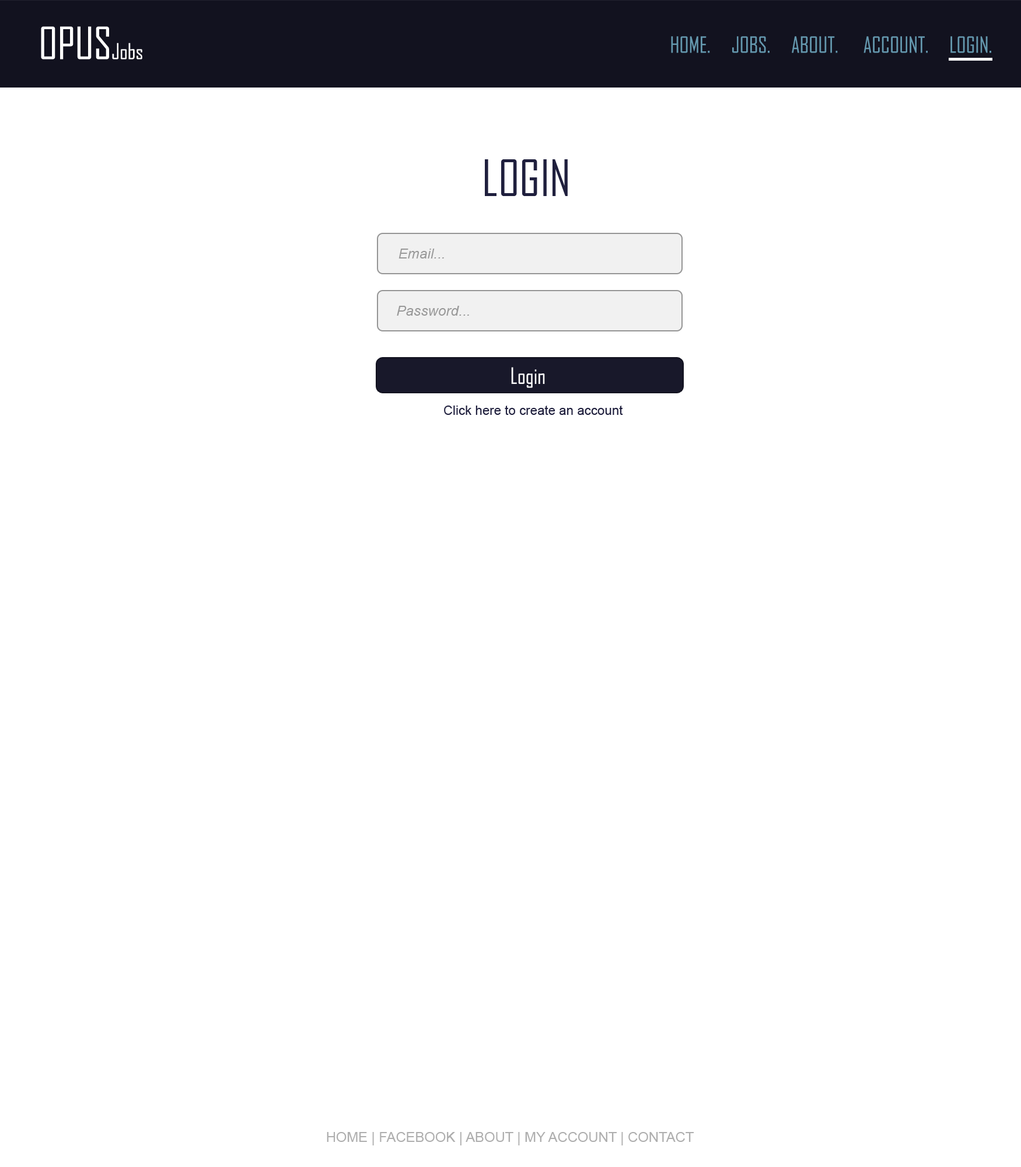
<style>
.page{position:relative;width:1021px;height:1167px;background:#ffffff}
.page>*{position:absolute;margin:0}
.t1{font:42.6px "AgencyFB-Reg";color:#fefefe}
.t2{font:21px "AgencyFB-Reg";color:#fefefe}
.t3{font:21.2px "AgencyFB-Reg";color:#6498ae}
.t4{font:47.9px "AgencyFB-Reg";color:#1f1f3d}
.t5{font:14.2px "Arial-ItalicMT";color:#999999}
.t6{font:21.6px "AgencyFB-Reg";color:#fefefe}
.t7{font:13px "ArialMT";color:#1f1f3d}
.t8{font:13.9px "ArialMT";color:#aeaeae}
</style>
<div class="page">
<p class="t1" style="left:41px;top:26px;width:101px;height:34px">OPUS<span class="t2">Jobs</span></p>
<p class="t3" style="left:671px;top:36px;width:321px;height:17px">HOME.     JOBS.     ABOUT.      ACCOUNT.     LOGIN.</p>
<p class="t4" style="left:485px;top:159px;width:83px;height:37px">LOGIN</p>
<p class="t5" style="left:399px;top:249px;width:45px;height:10px">Email...</p>
<p class="t5" style="left:397px;top:306px;width:72px;height:10px">Password...</p>
<p class="t6" style="left:511px;top:367px;width:34px;height:21px">Login</p>
<p class="t7" style="left:444px;top:406px;width:179px;height:9px">Click here to create an account</p>
<p class="t8" style="left:327px;top:1132px;width:368px;height:14px">HOME | FACEBOOK | ABOUT | MY ACCOUNT | CONTACT</p>
</div>
